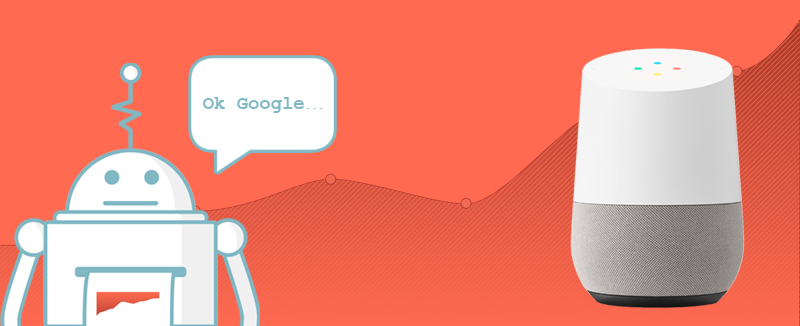
<style>
.page{position:relative;width:800px;height:326px;background:#ff6a51}
.page>*{position:absolute;margin:0}
.t1{font:18.9px "CourierNewPS-BoldMT";color:#80b8c4}
.t2{font:11px "CourierNewPS-BoldMT";color:#80b8c4}
</style>
<div class="page">
<p class="t1" style="left:203px;top:97px;width:119px;height:16px">Ok Google<span class="t2">...</span></p>
</div>
